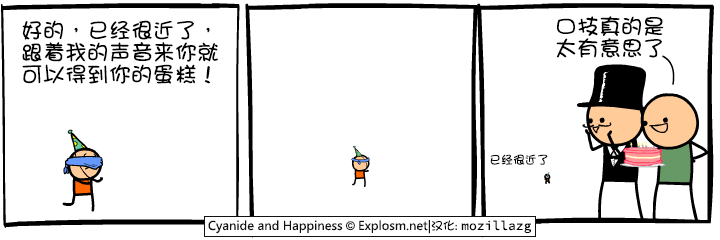
<style>
.page{position:relative;width:720px;height:240px;background:#ffffff}
.page>*{position:absolute;margin:0}
.t1{font:22px/22px "DFGirl";color:#000000}
.t2{font:12px "DFGirl";color:#000000}
</style>
<div class="page">
<p class="t1" style="left:556px;top:16px;width:108px;height:42px">口技真的是<br>太有意思了</p>
<p class="t1" style="left:22px;top:20px;width:196px;height:64px">好的，已经很近了，<br>跟着我的声音来你就<br>可以得到你的蛋糕！</p>
<p class="t2" style="left:490px;top:154px;width:58px;height:11px">已经很近了</p>
</div>
